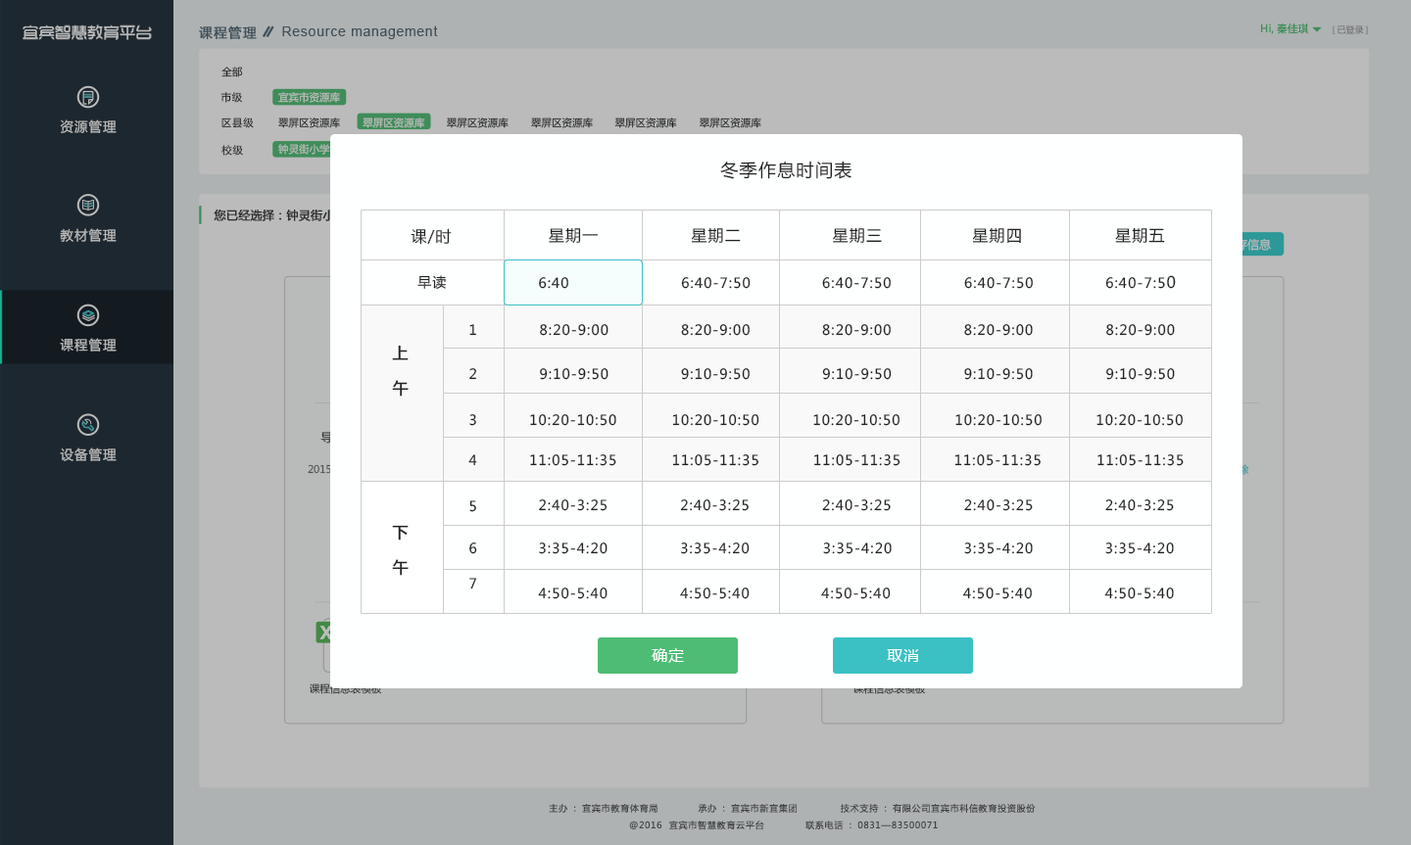
<style>
.page{position:relative;width:1411px;height:845px;background:#bbbbbb}
.page>*{position:absolute;margin:0}
.t1{font:16.2px "TRENDS";color:#bbbbbb}
.t2{font:13.2px "MicrosoftYaHei";letter-spacing:0.075em;color:#3f4f58;font-weight:bold}
.t3{font:13.2px "ArialMT";letter-spacing:0.075em;color:#3f4f58}
.t4{font:10.3px "MicrosoftYaHei";color:#3f8d5a;font-weight:bold}
.t5{font:8.8px "MicrosoftYaHei";letter-spacing:-0.01em;color:#868686}
.t6{font:10.3px "MicrosoftYaHei";color:#222222}
.t7{font:10.3px "MicrosoftYaHei";letter-spacing:0.075em;color:#222222}
.t8{font:10.3px "MicrosoftYaHei";color:#bbbbbb}
.t9{font:13.2px "MicrosoftYaHei";letter-spacing:0.075em;color:#bbbbbb}
.t10{font:10.3px "MicrosoftYaHei"}
.t11{font:17.6px "MicrosoftYaHei";letter-spacing:0.075em;color:#222222}
.t12{font:11.8px "MicrosoftYaHei";color:#333333;font-weight:bold}
.t13{font:15.7px "MicrosoftYaHei";letter-spacing:0.075em;color:#222222}
.t14{font:13.7px "MicrosoftYaHei";letter-spacing:0.075em;color:#222222}
.t15{font:15.7px/35.3px "MicrosoftYaHei";letter-spacing:0.075em;color:#222222;font-weight:bold}
.t16{font:15.7px "MicrosoftYaHei";letter-spacing:0.05em;color:#ffffff}
.t17{font:10.3px "MicrosoftYaHei";color:#333333}
.t18{font:8.8px "MicrosoftYaHei";letter-spacing:0.05em;color:#545454;font-weight:bold}
</style>
<div class="page">
<p class="t1" style="left:23px;top:24px;width:129px;height:16px">宜宾智慧教育平台</p>
<p class="t2" style="left:199px;top:25px;width:58px;height:15px">课程管理</p>
<p class="t3" style="left:282px;top:25px;width:156px;height:14px">Resource management</p>
<p class="t4" style="left:1261px;top:24px;width:47px;height:10px">Hi,秦佳琪</p>
<p class="t5" style="left:1332px;top:25px;width:35px;height:9px">[已登录]</p>
<p class="t6" style="left:221px;top:67px;width:22px;height:10px">全部</p>
<p class="t7" style="left:220px;top:92px;width:23px;height:11px">市级</p>
<p class="t8" style="left:278px;top:92px;width:62px;height:11px">宜宾市资源库</p>
<p class="t9" style="left:60px;top:120px;width:57px;height:13px">资源管理</p>
<p class="t7" style="left:221px;top:118px;width:33px;height:10px">区县级</p>
<p class="t10" style="left:278px;top:118px;width:62px;height:10px">翠屏区资源库</p>
<p class="t8" style="left:362px;top:118px;width:63px;height:10px">翠屏区资源库</p>
<p class="t6" style="left:446px;top:118px;width:62px;height:10px">翠屏区资源库</p>
<p class="t10" style="left:531px;top:118px;width:62px;height:10px">翠屏区资源库</p>
<p class="t6" style="left:614px;top:118px;width:63px;height:10px">翠屏区资源库</p>
<p class="t6" style="left:698px;top:118px;width:63px;height:10px">翠屏区资源库</p>
<p class="t7" style="left:221px;top:145px;width:22px;height:11px">校级</p>
<p class="t8" style="left:278px;top:144px;width:52px;height:11px">钟灵街小学</p>
<p class="t11" style="left:720px;top:161px;width:131px;height:18px">冬季作息时间表</p>
<p class="t12" style="left:214px;top:209px;width:133px;height:12px">您已经选择：钟灵街小学</p>
<p class="t9" style="left:60px;top:228px;width:57px;height:14px">教材管理</p>
<p class="t13" style="left:410px;top:228px;width:42px;height:17px">课/时</p>
<p class="t13" style="left:549px;top:227px;width:49px;height:17px">星期一</p>
<p class="t13" style="left:691px;top:228px;width:50px;height:16px">星期二</p>
<p class="t13" style="left:833px;top:227px;width:49px;height:17px">星期三</p>
<p class="t13" style="left:972px;top:228px;width:49px;height:16px">星期四</p>
<p class="t13" style="left:1115px;top:227px;width:50px;height:17px">星期五</p>
<p class="t14" style="left:417px;top:275px;width:29px;height:14px">早读</p>
<p class="t14" style="left:539px;top:277px;width:29px;height:12px">6:40</p>
<p class="t14" style="left:681px;top:277px;width:69px;height:12px">6:40-7:50</p>
<p class="t14" style="left:822px;top:277px;width:68px;height:12px">6:40-7:50</p>
<p class="t14" style="left:964px;top:277px;width:68px;height:12px">6:40-7:50</p>
<p class="t14" style="left:1105px;top:275px;width:70px;height:14px">6:40-7:5<span class="t13">0</span></p>
<p class="t14" style="left:469px;top:324px;width:7px;height:12px">1</p>
<p class="t14" style="left:540px;top:324px;width:68px;height:12px">8:20-9:00</p>
<p class="t14" style="left:681px;top:324px;width:68px;height:12px">8:20-9:00</p>
<p class="t14" style="left:822px;top:324px;width:68px;height:12px">8:20-9:00</p>
<p class="t14" style="left:964px;top:324px;width:68px;height:12px">8:20-9:00</p>
<p class="t14" style="left:1106px;top:324px;width:68px;height:12px">8:20-9:00</p>
<p class="t9" style="left:60px;top:338px;width:57px;height:14px">课程管理</p>
<p class="t15" style="left:392px;top:345px;width:16px;height:52px;text-align:center">上<br>午</p>
<p class="t14" style="left:469px;top:368px;width:7px;height:12px">2</p>
<p class="t14" style="left:540px;top:368px;width:68px;height:12px">9:10-9:50</p>
<p class="t14" style="left:681px;top:368px;width:68px;height:12px">9:10-9:50</p>
<p class="t14" style="left:822px;top:368px;width:69px;height:12px">9:10-9:50</p>
<p class="t14" style="left:964px;top:368px;width:68px;height:12px">9:10-9:50</p>
<p class="t14" style="left:1106px;top:368px;width:68px;height:12px">9:10-9:50</p>
<p class="t14" style="left:469px;top:414px;width:7px;height:12px">3</p>
<p class="t14" style="left:530px;top:414px;width:86px;height:12px">10:20-10:50</p>
<p class="t14" style="left:672px;top:414px;width:87px;height:12px">10:20-10:50</p>
<p class="t14" style="left:813px;top:414px;width:86px;height:12px">10:20-10:50</p>
<p class="t14" style="left:955px;top:414px;width:86px;height:12px">10:20-10:50</p>
<p class="t14" style="left:1096px;top:414px;width:86px;height:12px">10:20-10:50</p>
<p class="t9" style="left:60px;top:448px;width:57px;height:13px">设备管理</p>
<p class="t14" style="left:468px;top:455px;width:9px;height:11px">4</p>
<p class="t14" style="left:530px;top:455px;width:86px;height:11px">11:05-11:35</p>
<p class="t14" style="left:672px;top:455px;width:86px;height:11px">11:05-11:35</p>
<p class="t14" style="left:814px;top:455px;width:86px;height:11px">11:05-11:35</p>
<p class="t14" style="left:954px;top:455px;width:86px;height:11px">11:05-11:35</p>
<p class="t14" style="left:1097px;top:455px;width:86px;height:11px">11:05-11:35</p>
<p class="t14" style="left:469px;top:501px;width:7px;height:11px">5</p>
<p class="t14" style="left:539px;top:500px;width:68px;height:11px">2:40-3:25</p>
<p class="t14" style="left:680px;top:500px;width:68px;height:11px">2:40-3:25</p>
<p class="t14" style="left:822px;top:500px;width:68px;height:11px">2:40-3:25</p>
<p class="t14" style="left:964px;top:500px;width:68px;height:11px">2:40-3:25</p>
<p class="t14" style="left:1105px;top:500px;width:69px;height:11px">2:40-3:25</p>
<p class="t15" style="left:392px;top:525px;width:16px;height:51px;text-align:center">下<br>午</p>
<p class="t14" style="left:469px;top:543px;width:8px;height:11px">6</p>
<p class="t14" style="left:539px;top:543px;width:68px;height:11px">3:35-4:20</p>
<p class="t14" style="left:681px;top:543px;width:68px;height:11px">3:35-4:20</p>
<p class="t14" style="left:823px;top:543px;width:68px;height:11px">3:35-4:20</p>
<p class="t14" style="left:964px;top:543px;width:68px;height:11px">3:35-4:20</p>
<p class="t14" style="left:1105px;top:543px;width:69px;height:11px">3:35-4:20</p>
<p class="t14" style="left:469px;top:578px;width:8px;height:12px">7</p>
<p class="t14" style="left:538px;top:588px;width:69px;height:11px">4:50-5:40</p>
<p class="t14" style="left:680px;top:588px;width:69px;height:11px">4:50-5:40</p>
<p class="t14" style="left:821px;top:588px;width:69px;height:11px">4:50-5:40</p>
<p class="t14" style="left:962px;top:588px;width:69px;height:11px">4:50-5:40</p>
<p class="t14" style="left:1104px;top:588px;width:70px;height:11px">4:50-5:40</p>
<p class="t16" style="left:651px;top:648px;width:33px;height:15px">确定</p>
<p class="t16" style="left:887px;top:649px;width:31px;height:13px">取消</p>
<p class="t17" style="left:309px;top:684px;width:72px;height:11px">课程信息表模板</p>
<p class="t18" style="left:549px;top:804px;width:108px;height:9px">主办：宜宾市教育体育局</p>
<p class="t18" style="left:697px;top:804px;width:99px;height:9px">承办：宜宾市新宜集团</p>
<p class="t18" style="left:840px;top:804px;width:195px;height:9px">技术支持：有限公司宜宾市科信教育投资股份</p>
<p class="t18" style="left:629px;top:821px;width:135px;height:10px">@2016  宜宾市智慧教育云平台</p>
<p class="t18" style="left:805px;top:821px;width:132px;height:10px">联系电话：0831—83500071</p>
</div>
